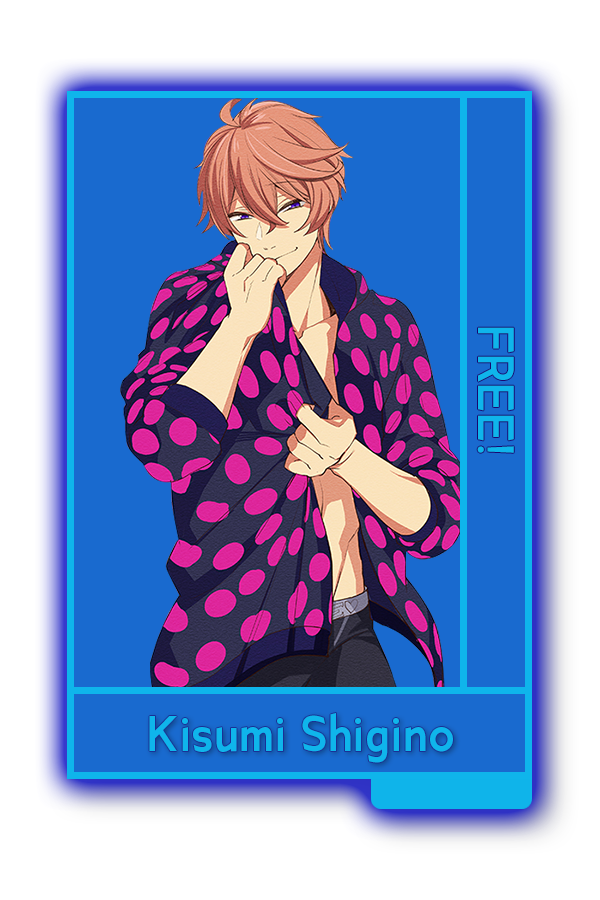
<style>
.page{position:relative;width:600px;height:900px;background:#196acf}
.page>*{position:absolute;margin:0}
.t1{font:47.8px "Ancillary-Bold";color:#0fb5eb}
.t2{font:46.7px "Ancillary-Bold";color:#0fb5eb}
</style>
<div class="page">
<p class="t1" style="left:477px;top:327px;width:37px;height:126px;rotate:90deg">FREE!</p>
<p class="t2" style="left:149px;top:713px;width:304px;height:50px">Kisumi Shigino</p>
</div>
